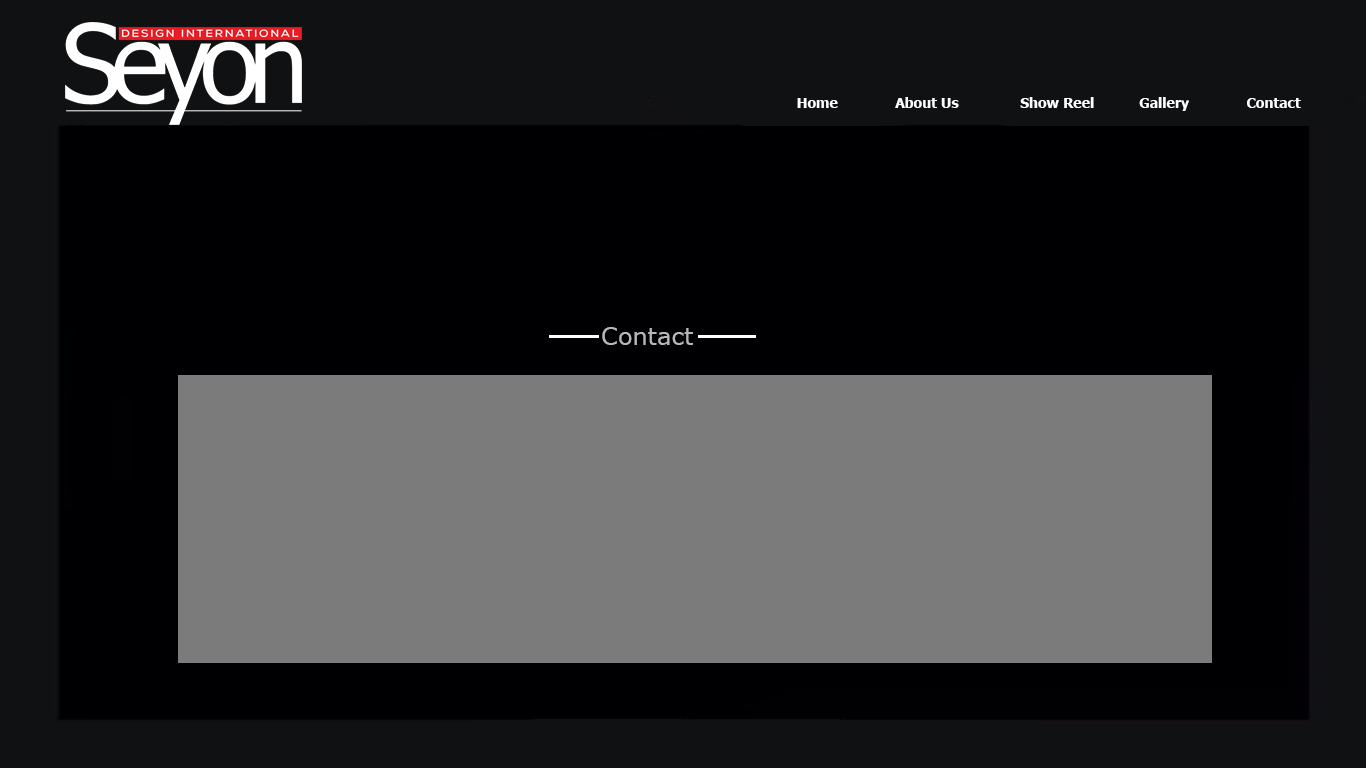
<style>
.page{position:relative;width:1366px;height:768px;background:#000002}
.page>*{position:absolute;margin:0}
.t1{font:14px "Tahoma-Bold";color:#ffffff}
.t2{font:24px "Verdana";color:#b7b7b7}
</style>
<div class="page">
<p class="t1" style="left:797px;top:97px;width:504px;height:14px">Home              About Us               Show Reel           Gallery              Contact</p>
<p class="t2" style="left:602px;top:327px;width:91px;height:18px">Contact</p>
</div>
